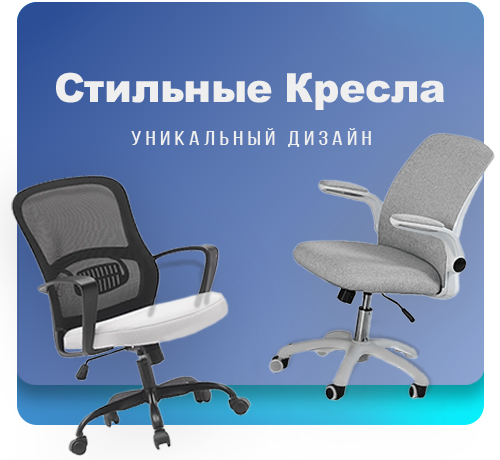
<style>
.page{position:relative;width:500px;height:460px}
.page>*{position:absolute;margin:0}
.t1{font:40.3px "Arial-Black";letter-spacing:-0.02em;color:#efefef}
.t2{font:20.1px "BebasNeueRegular";letter-spacing:0.18em;color:#efefef;scale:1.22 1}
</style>
<div class="page">
<p class="t1" style="left:56px;top:72px;width:389px;height:38px">Стильные Кресла</p>
<p class="t2" style="left:131px;top:128px;width:240px;height:19px">Уникальный Дизайн</p>
</div>
